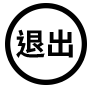
<style>
.page{position:relative;width:92px;height:88px;background:#ffffff}
.page>*{position:absolute;margin:0}
.t1{font:30px "NotoSansHant-Bold";color:#010101}
</style>
<div class="page">
<p class="t1" style="left:16px;top:29px;width:57px;height:29px">退出</p>
</div>
